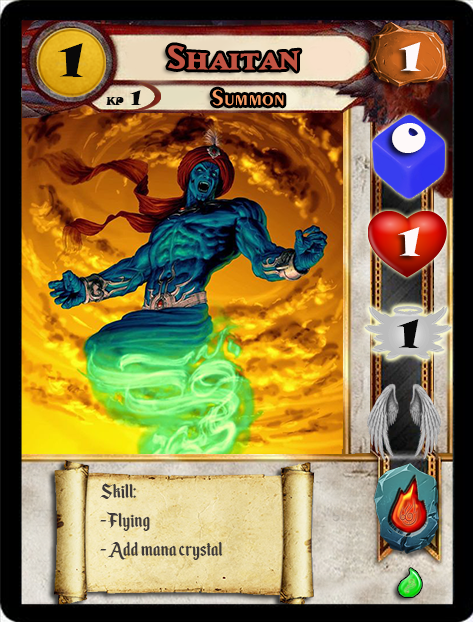
<style>
.page{position:relative;width:473px;height:622px}
.page>*{position:absolute;margin:0}
.t1{font:46.6px "SnapITC-Regular";color:#090909;scale:1.05 1}
.t2{font:40px "MatrixBoldSmallCaps";color:#c25443;scale:1.06 1}
.t3{font:40px "SnapITC-Regular";color:#fef9f9;scale:1.05 1}
.t4{font:22.7px "Exotic350BT-DemiBold";color:#f89c64;scale:1.06 1}
.t5{font:20.5px "SnapITC-Regular";color:#090909}
.t6{font:40px "SnapITC-Regular";color:#090909;scale:1.05 1}
.t7{font:24px "EnchantedLand";color:#3e3939}
</style>
<div class="page">
<p class="t1" style="left:58px;top:43px;width:25px;height:34px">1</p>
<p class="t2" style="left:168px;top:45px;width:132px;height:26px">Shaitan</p>
<p class="t3" style="left:399px;top:42px;width:22px;height:29px">1</p>
<p class="t4" style="left:212px;top:89px;width:72px;height:17px">Summon</p>
<p class="t5" style="left:130px;top:90px;width:11px;height:15px">1</p>
<p class="t3" style="left:392px;top:123px;width:34px;height:30px">0</p>
<p class="t3" style="left:398px;top:227px;width:22px;height:29px">1</p>
<p class="t6" style="left:397px;top:319px;width:22px;height:29px">1</p>
<p class="t7" style="left:100px;top:483px;width:123px;height:77px">Skill:<br>- Flying<br>- Add mana crystal</p>
</div>
